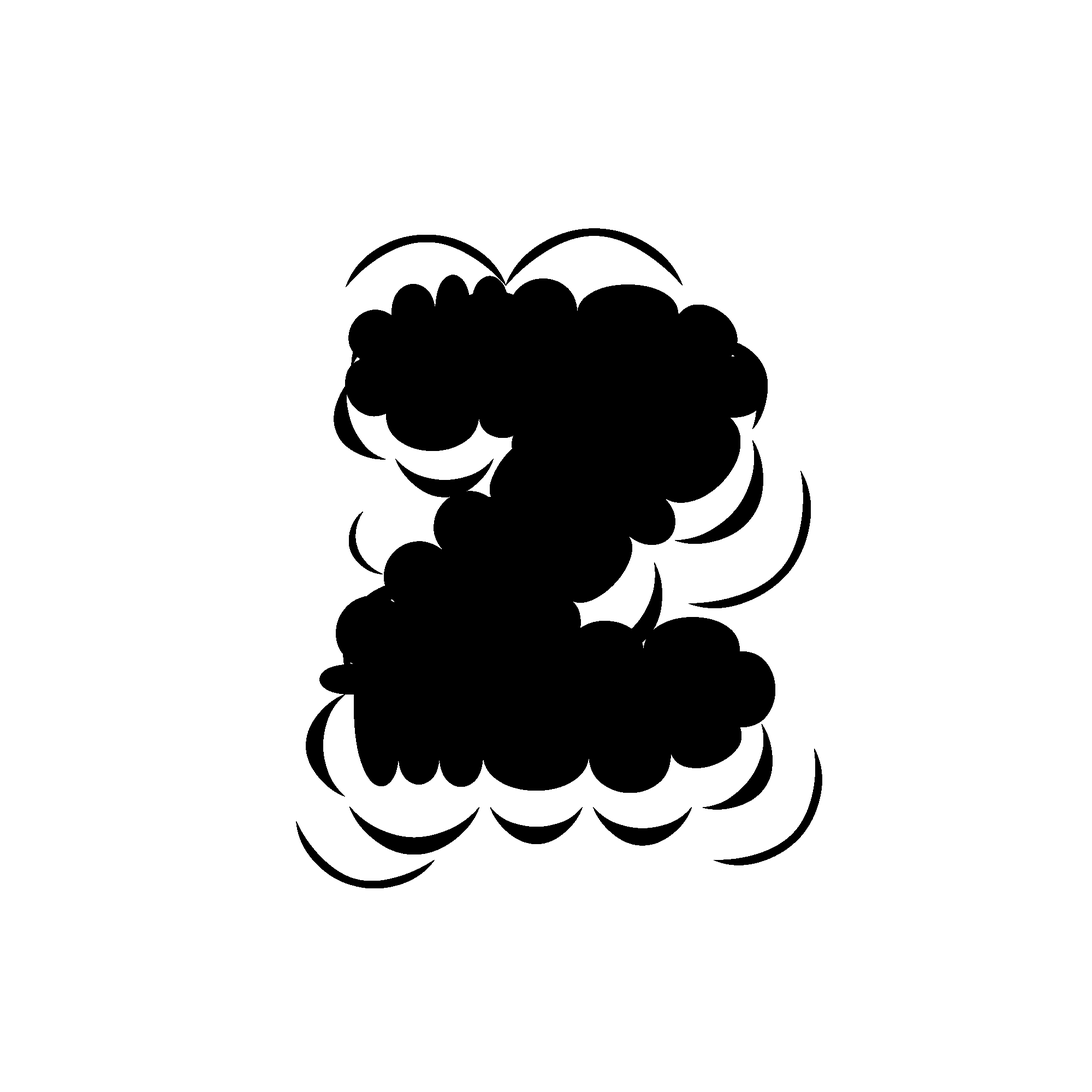
<style>
.page{position:relative;width:1092px;height:1092px;background:#ffffff}
.page>*{position:absolute;margin:0}
.t1{font:682.5px "RubikBubbles-Regular";color:#000000}
</style>
<div class="page">
<p class="t1" style="left:319px;top:275px;width:456px;height:518px">Z</p>
</div>
